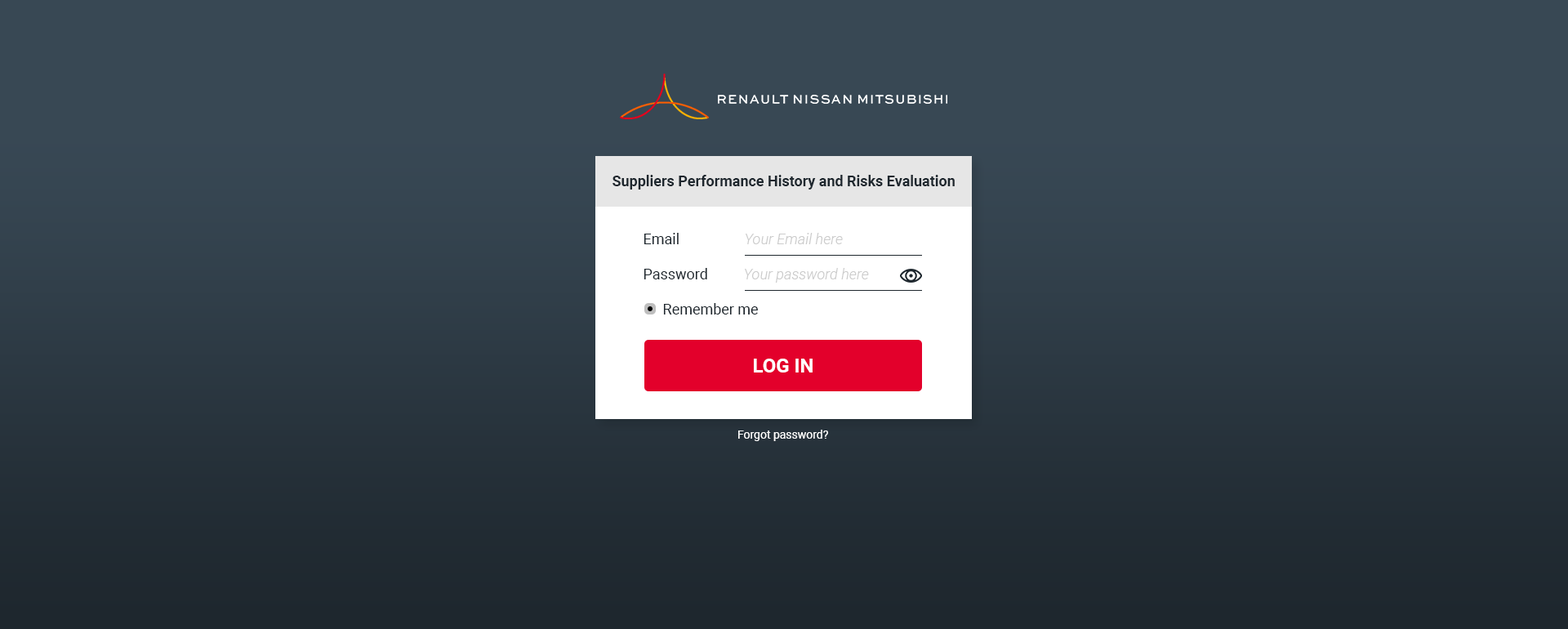
<style>
.page{position:relative;width:1568px;height:629px;background:#384854}
.page>*{position:absolute;margin:0}
.t1{font:14.7px "Roboto-Bold";color:#1e272e}
.t2{font:14.7px "Roboto-Regular";color:#1e272e}
.t3{font:14.7px "Roboto-LightItalic";color:#cccccc}
.t4{font:19.6px "Roboto-Bold";color:#ffffff}
.t5{font:11.4px "Roboto-Regular";color:#ffffff}
</style>
<div class="page">
<p class="t1" style="left:612px;top:175px;width:343px;height:14px">Suppliers Performance History and Risks Evaluation</p>
<p class="t2" style="left:644px;top:233px;width:35px;height:11px">Email</p>
<p class="t3" style="left:745px;top:233px;width:98px;height:11px">Your Email here</p>
<p class="t2" style="left:644px;top:268px;width:63px;height:11px">Password</p>
<p class="t3" style="left:744px;top:268px;width:125px;height:15px">Your password here</p>
<p class="t2" style="left:663px;top:303px;width:95px;height:11px">Remember me</p>
<p class="t4" style="left:754px;top:359px;width:59px;height:13px">LOG IN</p>
<p class="t5" style="left:738px;top:430px;width:90px;height:11px">Forgot password?</p>
</div>
